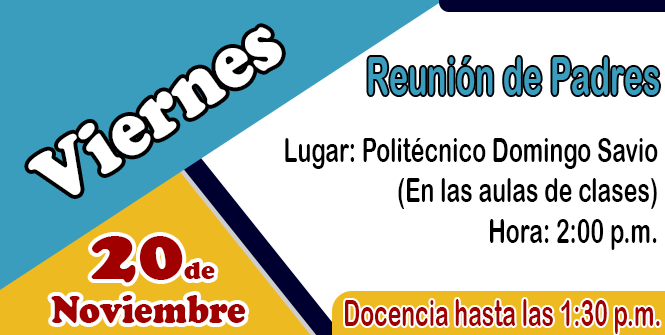
<style>
.page{position:relative;width:665px;height:335px;background:#ffffff}
.page>*{position:absolute;margin:0}
.t1{font:79px "CooperBlack";color:#ffffff;scale:0.9 1}
.t2{font:53px "ArialRoundedMTBold";color:#3b9dbe;scale:0.61 1}
.t3{font:33.6px "ArialRoundedMTBold";color:#000000;scale:0.69 1}
.t4{font:77.4px "CooperBlack";color:#a10000}
.t5{font:26.2px "CooperBlack";color:#a10000}
.t6{font:41.4px "CooperBlack";color:#a10000;scale:0.85 1}
.t7{font:37.2px "ArialRoundedMTBold";color:#a10000;scale:0.62 1}
</style>
<div class="page">
<p class="t1" style="left:28px;top:27px;width:254px;height:168px;rotate:-33deg">Viernes</p>
<p class="t2" style="left:368px;top:57px;width:291px;height:38px">Reunión de Padres</p>
<p class="t3" style="left:285px;top:138px;width:373px;height:112px;text-align:right">Lugar: Politécnico Domingo Savio<br>(En las aulas de clases)<br>Hora: 2:00 p.m.</p>
<p class="t4" style="left:91px;top:236px;width:124px;height:47px">20<span class="t5">de</span></p>
<p class="t6" style="left:51px;top:295px;width:195px;height:28px">Noviembre</p>
<p class="t7" style="left:345px;top:299px;width:315px;height:35px">Docencia hasta las 1:30 p.m.</p>
</div>
